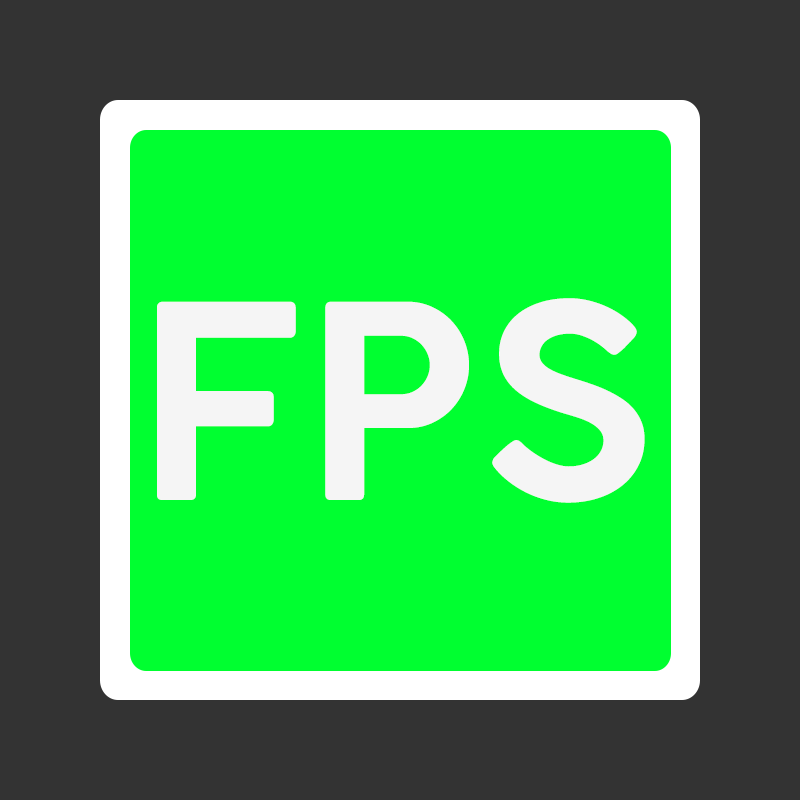
<style>
.page{position:relative;width:800px;height:800px;background:#333333}
.page>*{position:absolute;margin:0}
.t1{font:266.9px "COCOGOOSE-DemiBold";color:#f5f5f5}
</style>
<div class="page">
<p class="t1" style="left:157px;top:298px;width:488px;height:205px">FPS</p>
</div>
